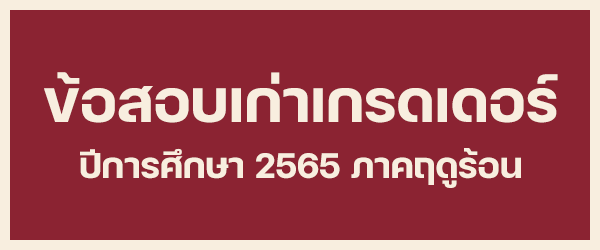
<style>
.page{position:relative;width:600px;height:250px;background:#8b2332}
.page>*{position:absolute;margin:0}
.t1{font:80px "FCMinimalBold";color:#f8eedf}
.t2{font:48px "FCMinimalBold";color:#f8eedf}
</style>
<div class="page">
<p class="t1" style="left:44px;top:72px;width:514px;height:51px">ข้อสอบเก่าเกรดเดอร์</p>
<p class="t2" style="left:80px;top:148px;width:441px;height:40px">ปีการศึกษา 2565 ภาคฤดูร้อน</p>
</div>
